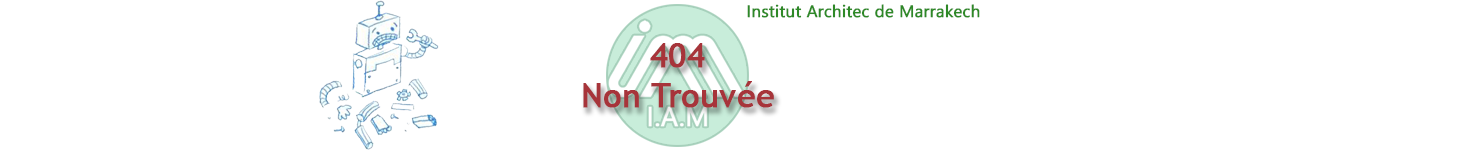
<style>
.page{position:relative;width:1470px;height:150px;background:#ffffff}
.page>*{position:absolute;margin:0}
.t1{font:16.7px "SegoeUI";color:#2e8927;font-weight:bold}
.t2{font:33.3px "TrebuchetMS";color:#a7343a;font-weight:bold}
</style>
<div class="page">
<p class="t1" style="left:747px;top:4px;width:233px;height:14px">Institut Architec de Marrakech</p>
<p class="t2" style="left:583px;top:43px;width:191px;height:65px;text-align:center">404<br>Non Trouvée</p>
</div>
